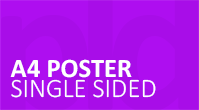
<style>
.page{position:relative;width:199px;height:110px;background:#a80de8}
.page>*{position:absolute;margin:0}
.t1{font:26.6px "Calibri-Bold";color:#ffffff}
.t2{font:26.6px "Calibri-Light";color:#ffffff}
</style>
<div class="page">
<p class="t1" style="left:10px;top:59px;width:122px;height:19px">A4 POSTER</p>
<p class="t2" style="left:11px;top:79px;width:145px;height:19px">SINGLE SIDED</p>
</div>
